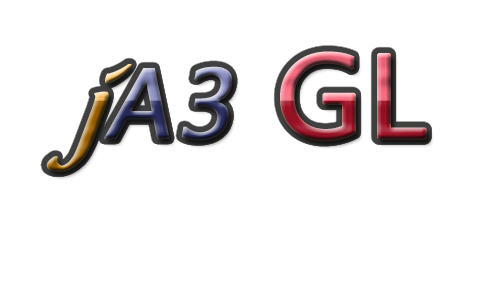
<style>
.page{position:relative;width:500px;height:300px;background:#ffffff}
.page>*{position:absolute;margin:0}
.t1{font:100px "MicrosoftTaiLe";letter-spacing:0.04em;font-weight:bold;font-style:italic}
.t2{font:100px "LucidaHandwriting-Italic";letter-spacing:0.04em;font-weight:bold;font-style:italic}
.t3{font:119px "MicrosoftNewTaiLue";font-weight:bold;scale:1.07 1}
</style>
<div class="page">
<p class="t1" style="left:46px;top:51px;width:381px;height:121px"><span class="t2">j</span>A3 <span class="t3">GL</span></p>
</div>
